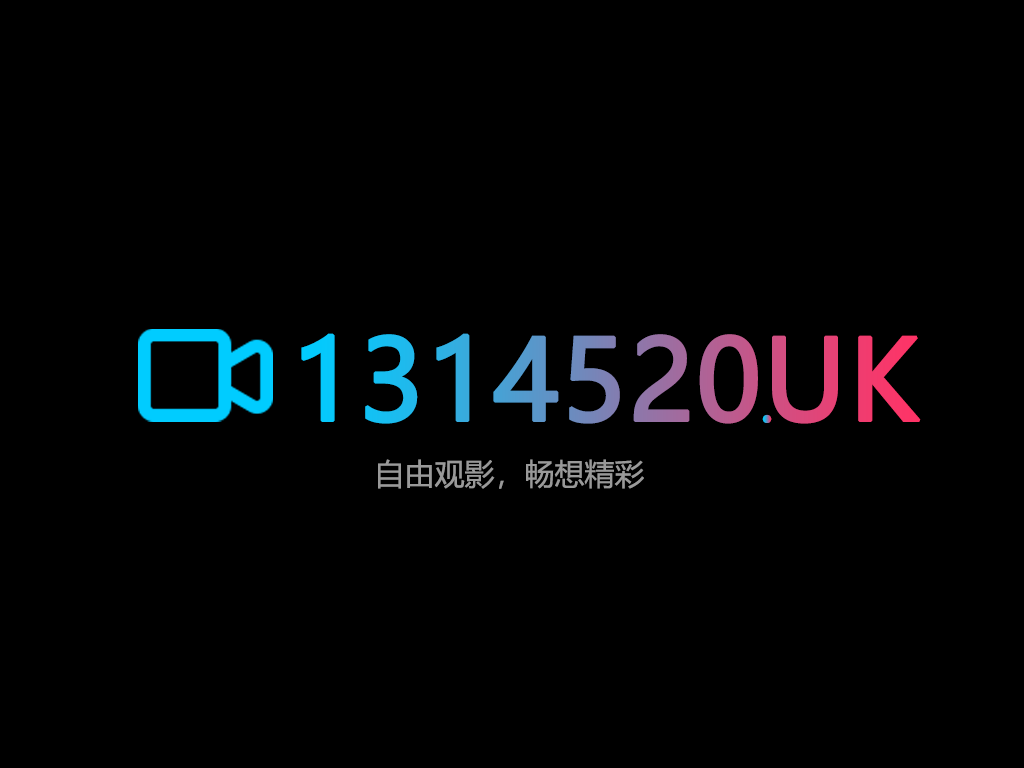
<style>
.page{position:relative;width:1024px;height:768px;background:#000000}
.page>*{position:absolute;margin:0}
.t1{font:110px "MicrosoftYaHei";font-weight:bold}
.t2{font:52.8px "MicrosoftYaHei";font-weight:bold}
.t3{font:30px "MicrosoftYaHei";color:#999999}
</style>
<div class="page">
<p class="t1" style="left:301px;top:333px;width:620px;height:91px">1314520UK</p>
<p class="t2" style="left:762px;top:414px;width:10px;height:9px">.</p>
<p class="t3" style="left:378px;top:459px;width:266px;height:30px">自由观影，畅想精彩</p>
</div>
